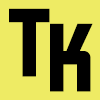
<style>
.page{position:relative;width:100px;height:100px;background:#eeeb64}
.page>*{position:absolute;margin:0}
.t1{font:93.9px "Cornerstone";color:#000000}
</style>
<div class="page">
<p class="t1" style="left:9px;top:8px;width:41px;height:69px">T</p>
<p class="t1" style="left:50px;top:23px;width:43px;height:69px">k</p>
</div>
